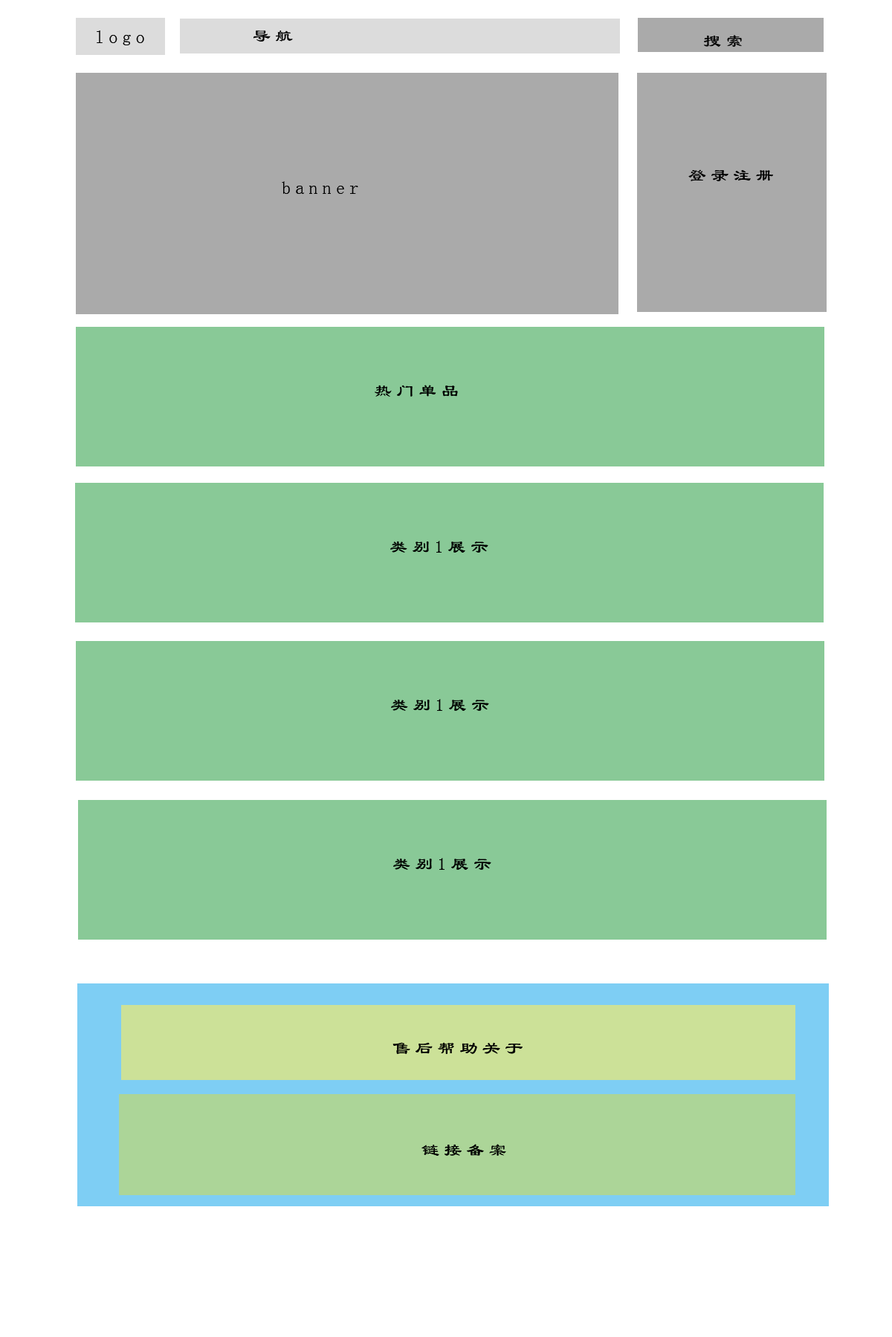
<style>
.page{position:relative;width:892px;height:1337px;background:#ffffff}
.page>*{position:absolute;margin:0}
.t1{font:17.8px "LiSu";letter-spacing:0.26em;color:#000000}
</style>
<div class="page">
<p class="t1" style="left:97px;top:30px;width:47px;height:15px">logo</p>
<p class="t1" style="left:253px;top:30px;width:40px;height:12px">导航</p>
<p class="t1" style="left:704px;top:35px;width:38px;height:12px">搜索</p>
<p class="t1" style="left:688px;top:169px;width:85px;height:12px">登录注册</p>
<p class="t1" style="left:282px;top:181px;width:76px;height:13px">banner</p>
<p class="t1" style="left:374px;top:385px;width:84px;height:12px">热门单品</p>
<p class="t1" style="left:390px;top:541px;width:98px;height:12px">类别1展示</p>
<p class="t1" style="left:391px;top:699px;width:98px;height:12px">类别1展示</p>
<p class="t1" style="left:393px;top:858px;width:98px;height:12px">类别1展示</p>
<p class="t1" style="left:392px;top:1042px;width:130px;height:12px">售后帮助关于</p>
<p class="t1" style="left:421px;top:1144px;width:85px;height:12px">链接备案</p>
</div>
